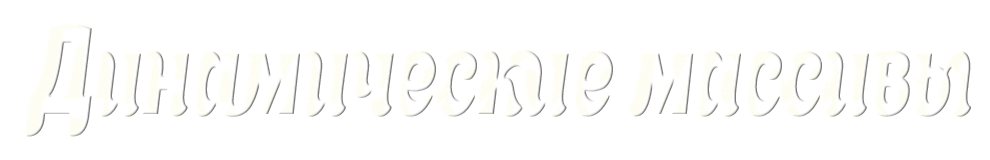
<style>
.page{position:relative;width:990px;height:160px;background:#ffffff}
.page>*{position:absolute;margin:0}
.t1{font:120px "Appetite-Italic";color:#fefef9;scale:0.67 1}
</style>
<div class="page">
<p class="t1" style="left:24px;top:24px;width:947px;height:113px">Динамические массивы</p>
</div>
